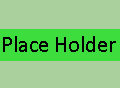
<style>
.page{position:relative;width:120px;height:88px;background:#a9d09d}
.page>*{position:absolute;margin:0}
.t1{font:22.5px "Calibri";color:#000000}
</style>
<div class="page">
<p class="t1" style="left:3px;top:36px;width:113px;height:16px">Place Holder</p>
</div>
